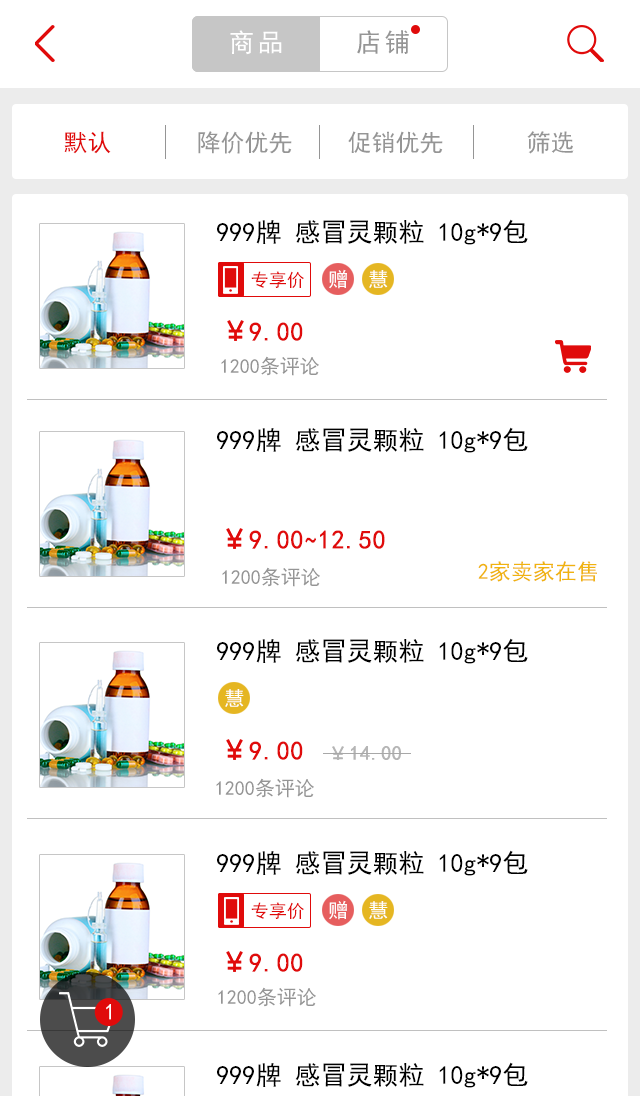
<style>
.page{position:relative;width:640px;height:1096px;background:#ffffff}
.page>*{position:absolute;margin:0}
.t1{font:26px "SimHei";letter-spacing:0.12em;color:#ffffff}
.t2{font:26px "SimHei";letter-spacing:0.12em;color:#959595}
.t3{font:24px "SimHei";color:#e00b0b}
.t4{font:24px "SimHei";color:#959595}
.t5{font:26px "SimHei";color:#000000}
.t6{font:20.1px "SimHei";color:#ffffff}
.t7{font:18px "SimHei";color:#e00b0b}
.t8{font:26px "SimHei";color:#e00b0b;font-weight:bold}
.t9{font:20px "SimHei";color:#959595}
.t10{font:22px "SimHei";color:#f0b30f}
.t11{font:20px "SimHei";color:#b5b5b5;font-weight:bold}
.t12{font:22.4px "SimHei";color:#ffffff}
</style>
<div class="page">
<p class="t1" style="left:230px;top:30px;width:52px;height:25px">商品</p>
<p class="t2" style="left:357px;top:30px;width:52px;height:24px">店铺</p>
<p class="t3" style="left:64px;top:131px;width:47px;height:23px">默认</p>
<p class="t4" style="left:198px;top:131px;width:94px;height:23px">降价优先</p>
<p class="t4" style="left:348px;top:131px;width:95px;height:23px">促销优先</p>
<p class="t4" style="left:527px;top:131px;width:47px;height:23px">筛选</p>
<p class="t5" style="left:217px;top:219px;width:311px;height:26px">999牌 感冒灵颗粒 10g*9包</p>
<p class="t6" style="left:329px;top:269px;width:18px;height:20px">赠</p>
<p class="t6" style="left:369px;top:270px;width:19px;height:18px">慧</p>
<p class="t7" style="left:251px;top:271px;width:53px;height:17px">专享价</p>
<p class="t8" style="left:249px;top:322px;width:54px;height:19px">9.00</p>
<p class="t9" style="left:221px;top:356px;width:98px;height:20px">1200条评论</p>
<p class="t5" style="left:217px;top:427px;width:311px;height:26px">999牌 感冒灵颗粒 10g*9包</p>
<p class="t8" style="left:249px;top:530px;width:136px;height:19px">9.00~12.50</p>
<p class="t9" style="left:222px;top:567px;width:98px;height:20px">1200条评论</p>
<p class="t10" style="left:478px;top:561px;width:119px;height:21px">2家卖家在售</p>
<p class="t5" style="left:217px;top:638px;width:311px;height:26px">999牌 感冒灵颗粒 10g*9包</p>
<p class="t6" style="left:225px;top:689px;width:19px;height:18px">慧</p>
<p class="t8" style="left:249px;top:741px;width:54px;height:19px">9.00</p>
<p class="t11" style="left:351px;top:746px;width:50px;height:14px">14.00</p>
<p class="t9" style="left:216px;top:778px;width:98px;height:20px">1200条评论</p>
<p class="t5" style="left:217px;top:850px;width:311px;height:26px">999牌 感冒灵颗粒 10g*9包</p>
<p class="t7" style="left:251px;top:902px;width:53px;height:17px">专享价</p>
<p class="t6" style="left:329px;top:900px;width:18px;height:20px">赠</p>
<p class="t6" style="left:369px;top:901px;width:19px;height:18px">慧</p>
<p class="t8" style="left:249px;top:953px;width:54px;height:19px">9.00</p>
<p class="t9" style="left:218px;top:987px;width:98px;height:20px">1200条评论</p>
<p class="t12" style="left:106px;top:1004px;width:5px;height:16px">1</p>
<p class="t5" style="left:217px;top:1062px;width:311px;height:26px">999牌 感冒灵颗粒 10g*9包</p>
</div>
